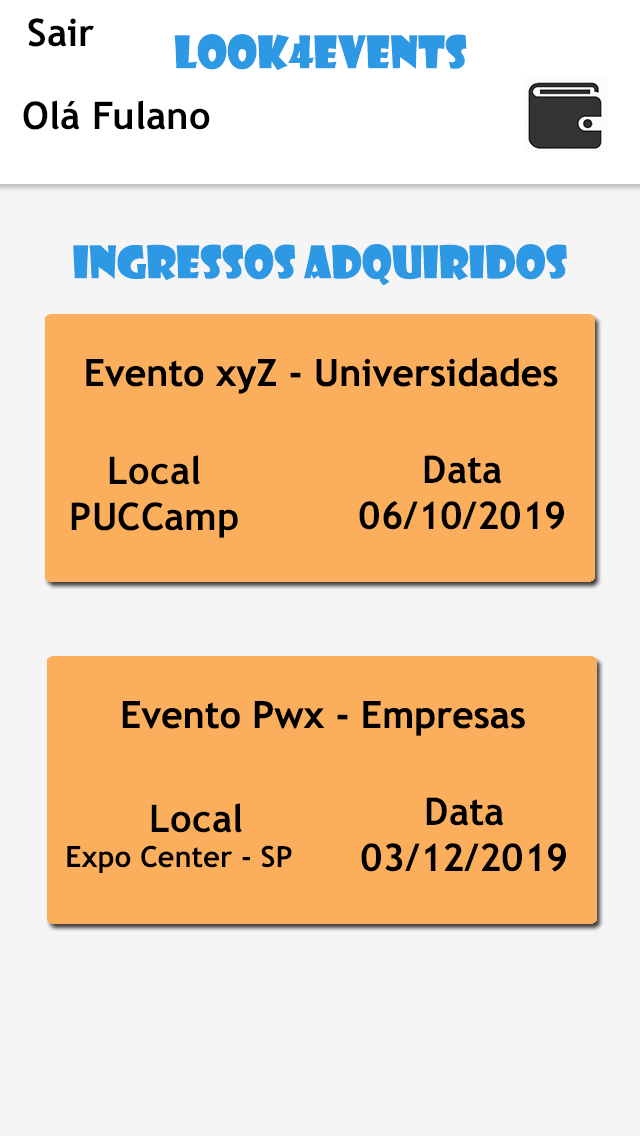
<style>
.page{position:relative;width:640px;height:1136px;background:#f5f5f5}
.page>*{position:absolute;margin:0}
.t1{font:38.1px "TrebuchetMS-Bold";color:#000000}
.t2{font:43.6px "ShowcardGothic-Reg";color:#2d99e4}
.t3{font:37.5px "TrebuchetMS-Bold";color:#000000}
.t4{font:38.2px "TrebuchetMS-Bold";color:#000000}
.t5{font:38.4px "TrebuchetMS-Bold";color:#000000}
.t6{font:29.2px "TrebuchetMS-Bold";color:#000000}
</style>
<div class="page">
<p class="t1" style="left:28px;top:18px;width:66px;height:29px">Sair</p>
<p class="t2" style="left:174px;top:34px;width:293px;height:36px">look4events</p>
<p class="t1" style="left:23px;top:100px;width:187px;height:30px">Olá Fulano</p>
<p class="t2" style="left:73px;top:244px;width:494px;height:42px">ingressos adquiridos</p>
<p class="t3" style="left:86px;top:357px;width:472px;height:37px">Evento xyZ - Universidades</p>
<p class="t4" style="left:71px;top:455px;width:167px;height:83px;text-align:center">Local<br>PUCCamp</p>
<p class="t5" style="left:359px;top:455px;width:205px;height:75px;text-align:center">Data<br>06/10/2019</p>
<p class="t3" style="left:122px;top:700px;width:403px;height:36px">Evento Pwx - Empresas</p>
<p class="t5" style="left:361px;top:797px;width:205px;height:75px;text-align:center">Data<br>03/12/2019</p>
<p class="t6" style="left:67px;top:803px;width:225px;height:70px;text-align:center"><span class="t4">Local<br></span>    Expo Center - SP</p>
</div>
